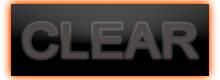
<style>
.page{position:relative;width:220px;height:80px;background:#000000}
.page>*{position:absolute;margin:0}
.t1{font:46.7px "ArialMT";color:#504747;font-weight:bold;scale:1.1 1}
</style>
<div class="page">
<p class="t1" style="left:23px;top:23px;width:175px;height:36px">CLEAR</p>
</div>
